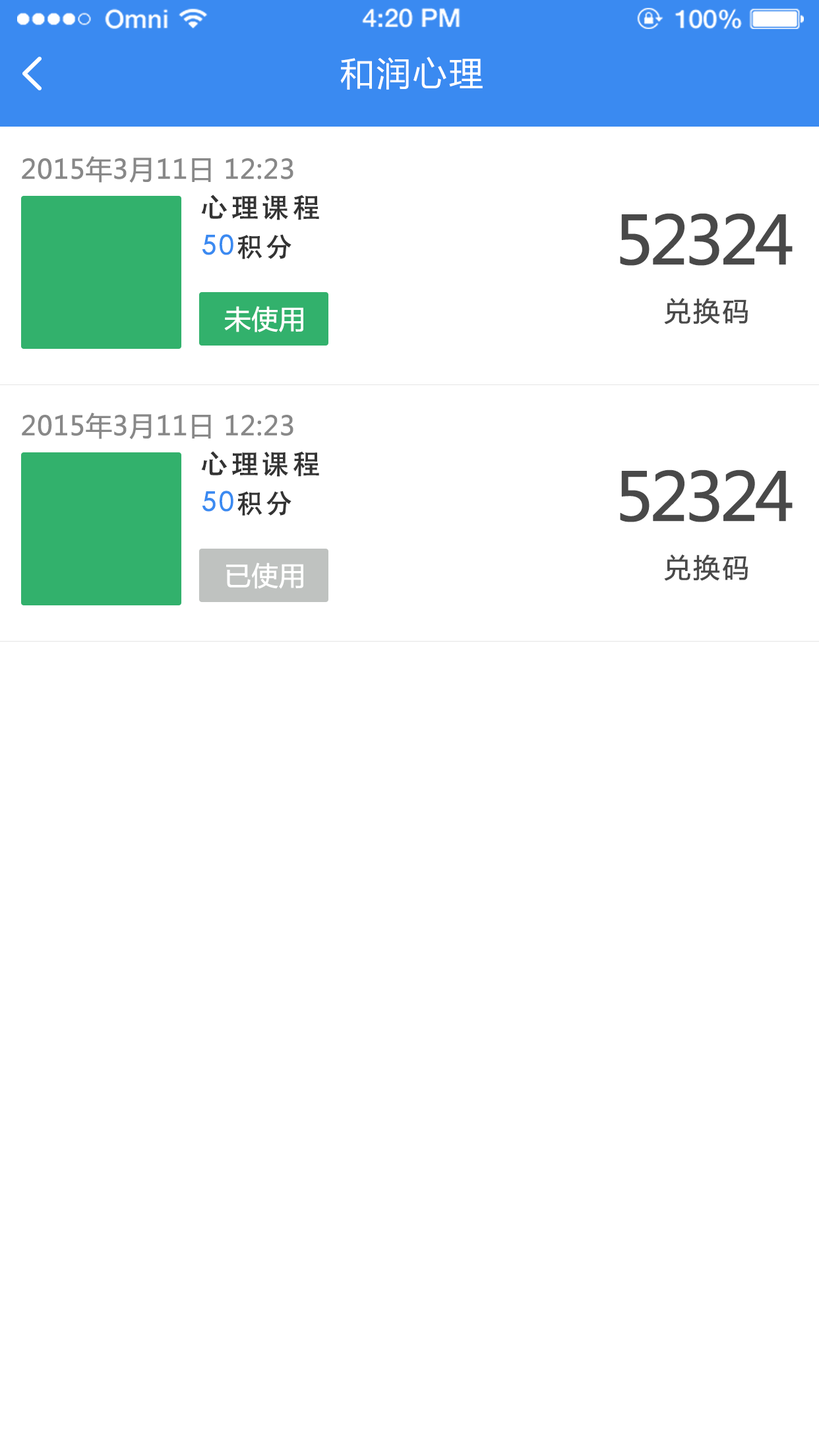
<style>
.page{position:relative;width:819px;height:1456px;background:#ffffff}
.page>*{position:absolute;margin:0}
.t1{font:33.6px "MicrosoftYaHei";letter-spacing:0.08em;color:#ffffff}
.t2{font:26.4px "MicrosoftYaHei";color:#888888;font-weight:bold}
.t3{font:27.7px "STHeitiSC-Medium";letter-spacing:0.08em;color:#333333;font-weight:bold}
.t4{font:65.9px "MicrosoftYaHei";letter-spacing:-0.08em;color:#494949;font-weight:bold}
.t5{font:26.4px "STHeitiSC-Medium";letter-spacing:0.08em;color:#3a8af1;font-weight:bold}
.t6{font:26.4px "STHeitiSC-Medium";letter-spacing:0.08em;color:#333333;font-weight:bold}
.t7{font:26.4px "MicrosoftYaHei";color:#ffffff;font-weight:bold}
.t8{font:26.4px "MicrosoftYaHei";letter-spacing:0.08em;color:#494949;font-weight:bold}
</style>
<div class="page">
<p class="t1" style="left:340px;top:57px;width:143px;height:33px">和润心理</p>
<p class="t2" style="left:22px;top:156px;width:271px;height:27px">2015年3月11日 12:23</p>
<p class="t3" style="left:201px;top:195px;width:118px;height:25px">心理课程</p>
<p class="t4" style="left:620px;top:213px;width:173px;height:53px">52324</p>
<p class="t5" style="left:202px;top:234px;width:89px;height:25px">50<span class="t6">积分</span></p>
<p class="t7" style="left:224px;top:306px;width:79px;height:26px">未使用</p>
<p class="t8" style="left:664px;top:298px;width:84px;height:26px">兑换码</p>
<p class="t2" style="left:22px;top:413px;width:271px;height:26px">2015年3月11日 12:23</p>
<p class="t3" style="left:201px;top:451px;width:118px;height:26px">心理课程</p>
<p class="t4" style="left:620px;top:470px;width:173px;height:52px">52324</p>
<p class="t5" style="left:202px;top:491px;width:89px;height:25px">50<span class="t6">积分</span></p>
<p class="t8" style="left:664px;top:555px;width:84px;height:26px">兑换码</p>
<p class="t7" style="left:226px;top:562px;width:77px;height:27px">已使用</p>
</div>
